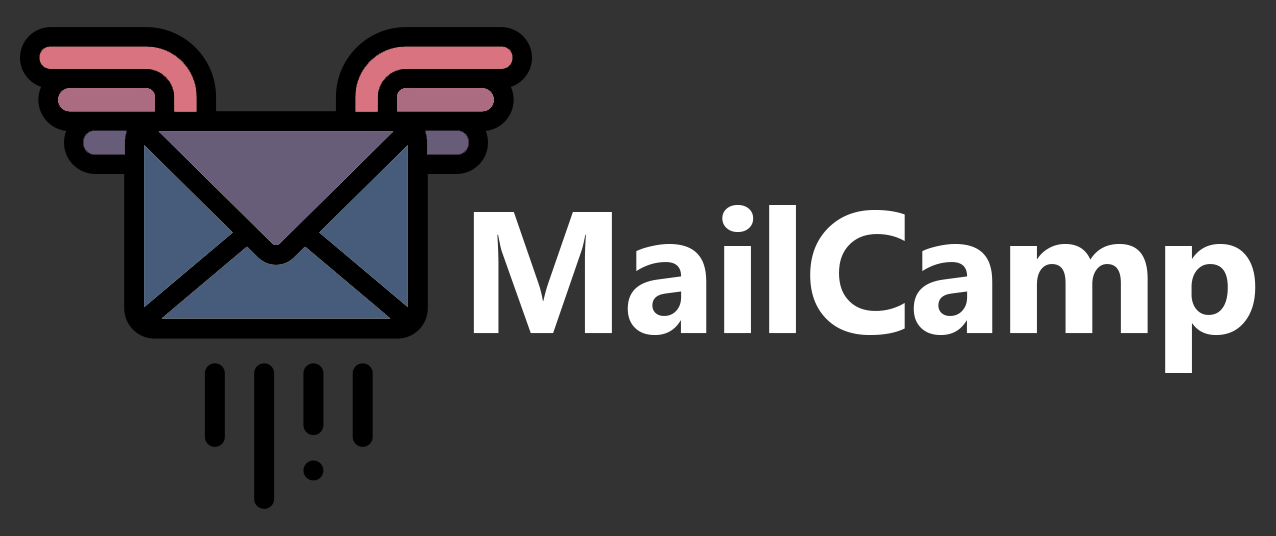
<style>
.page{position:relative;width:1276px;height:536px;background:#333333}
.page>*{position:absolute;margin:0}
.t1{font:173.3px "SegoeUI-Bold";letter-spacing:-0.02em;color:#ffffff}
</style>
<div class="page">
<p class="t1" style="left:473px;top:205px;width:783px;height:168px">MailCamp</p>
</div>
